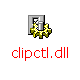
<style>
.page{position:relative;width:80px;height:80px;background:#ffffff}
.page>*{position:absolute;margin:0}
.t1{font:14px "MSReferenceSansSerif";color:#ff0000}
</style>
<div class="page">
<p class="t1" style="left:12px;top:47px;width:56px;height:14px">clipctl.dll</p>
</div>
